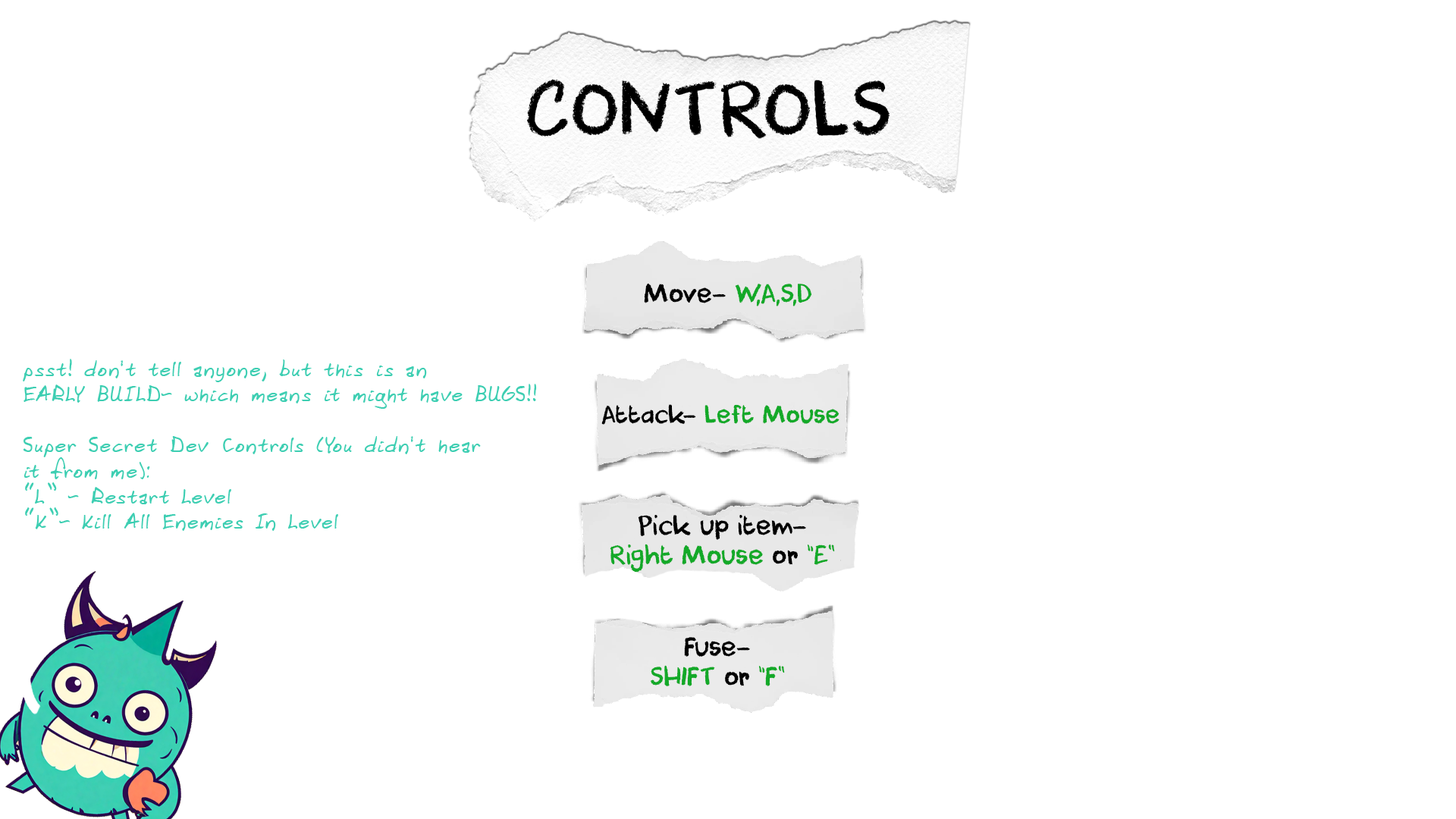
<style>
.page{position:relative;width:1456px;height:819px;background:#ffffff}
.page>*{position:absolute;margin:0}
.t1{font:74.4px "DKCoolCrayon";color:#000000}
.t2{font:24.6px "DKCoolCrayon";color:#13a928}
.t3{font:24.6px "DKCoolCrayon";color:#000000}
.t4{font:21.2px "DomesticManners";letter-spacing:0.04em;color:#3dceb2}
.t5{font:23.3px "DKCoolCrayon";color:#13a928}
.t6{font:23.3px "DKCoolCrayon";color:#000000}
</style>
<div class="page">
<p class="t1" style="left:526px;top:79px;width:364px;height:60px">CONTROLS</p>
<p class="t2" style="left:644px;top:283px;width:168px;height:23px"><span class="t3">Move-</span> W,A,S,D</p>
<p class="t4" style="left:23px;top:359px;width:514px;height:172px">psst! don't tell anyone, but this is an<br>EARLY BUILD- which means it might have BUGS!!<br><br>Super Secret Dev Controls (You didn't hear<br>it from me):<br>“L” - Restart Level<br>“K”- Kill All Enemies In Level</p>
<p class="t5" style="left:601px;top:404px;width:238px;height:21px"><span class="t6">Attack- </span>Left Mouse</p>
<p class="t3" style="left:610px;top:515px;width:225px;height:58px;text-align:center">Pick up item-<br><span class="t2">Right Mouse</span> or <span class="t2">“E”</span></p>
<p class="t3" style="left:650px;top:637px;width:135px;height:50px;text-align:center">Fuse-<br><span class="t2">SHIFT</span> or <span class="t2">“F”</span></p>
</div>
